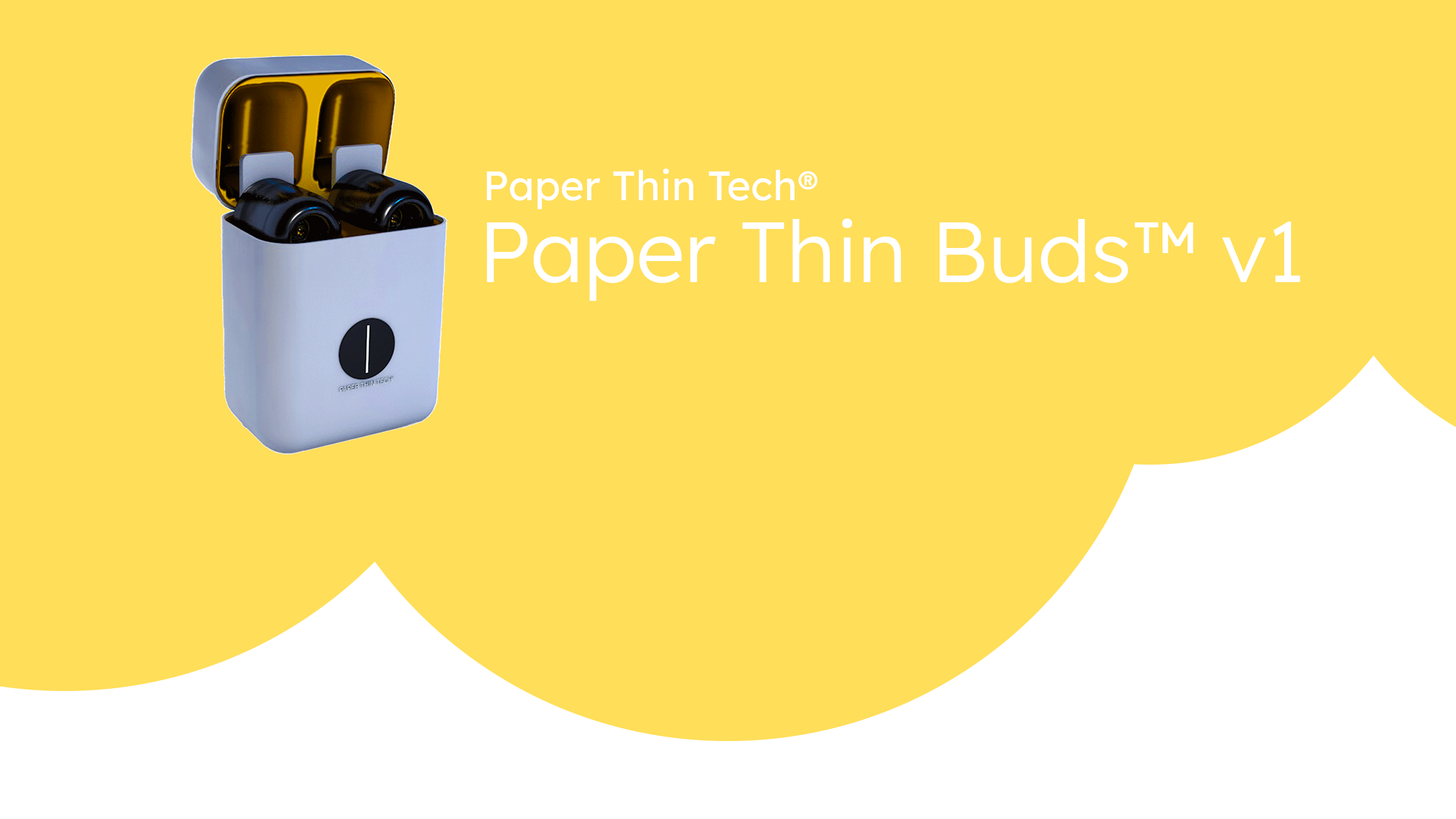
<style>
.page{position:relative;width:1456px;height:819px;background:#ffde59}
.page>*{position:absolute;margin:0}
.t1{font:40.9px "Lexend-Regular";color:#ffffff}
.t2{font:85.3px "Lexend-Light";color:#ffffff}
</style>
<div class="page">
<p class="t1" style="left:487px;top:168px;width:331px;height:41px">Paper Thin Tech®</p>
<p class="t2" style="left:487px;top:218px;width:813px;height:83px">Paper Thin Buds™ v1</p>
</div>
